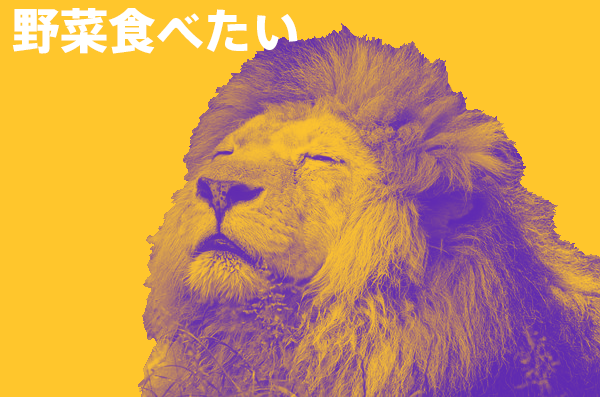
<style>
.page{position:relative;width:600px;height:397px;background:#ffc62c}
.page>*{position:absolute;margin:0}
.t1{font:48px "AxisStd-Heavy";color:#ffffff}
</style>
<div class="page">
<p class="t1" style="left:12px;top:8px;width:286px;height:46px">野菜食べたい</p>
</div>
